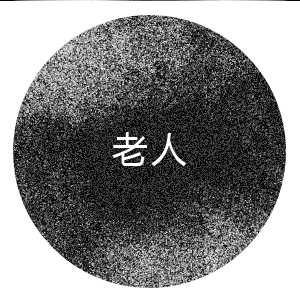
<style>
.page{position:relative;width:300px;height:300px;background:#ffffff}
.page>*{position:absolute;margin:0}
.t1{font:36px "MicrosoftYaHei";letter-spacing:0.1em;color:#ffffff}
</style>
<div class="page">
<p class="t1" style="left:112px;top:131px;width:75px;height:34px">老人</p>
</div>
